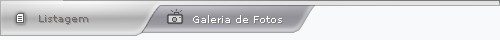
<style>
.page{position:relative;width:500px;height:40px;background:#f7f9fa}
.page>*{position:absolute;margin:0}
.t1{font:10px "Verdana";color:#746b6b}
.t2{font:10px "Verdana";color:#ffffff}
</style>
<div class="page">
<p class="t1" style="left:39px;top:15px;width:49px;height:9px">Listagem</p>
<p class="t2" style="left:193px;top:15px;width:89px;height:8px">Galeria de Fotos</p>
</div>
